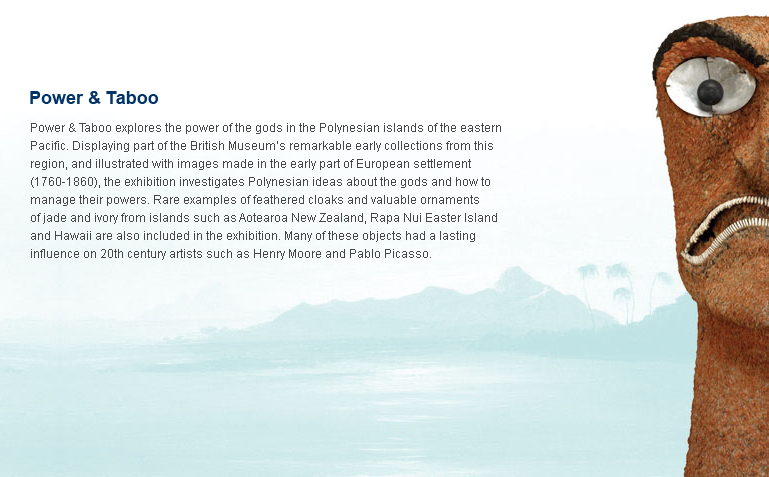
<style>
.page{position:relative;width:769px;height:477px;background:#ffffff}
.page>*{position:absolute;margin:0}
.t1{font:18px "Arial-BoldMT";color:#003467}
.t2{font:12px/18px "ArialMT";color:#464646}
</style>
<div class="page">
<p class="t1" style="left:30px;top:91px;width:129px;height:13px">Power &amp; Taboo</p>
<p class="t2" style="left:31px;top:123px;width:470px;height:137px">Power &amp; Taboo explores the power of the gods in the Polynesian islands of the eastern <br>Pacific. Displaying part of the British Museum’s remarkable early collections from this <br>region, and illustrated with images made in the early part of European settlement <br>(1760-1860), the exhibition investigates Polynesian ideas about the gods and how to <br>manage their powers. Rare examples of feathered cloaks and valuable ornaments <br>of jade and ivory from islands such as Aotearoa New Zealand, Rapa Nui Easter Island <br>and Hawaii are also included in the exhibition. Many of these objects had a lasting <br>influence on 20th century artists such as Henry Moore and Pablo Picasso.</p>
</div>
